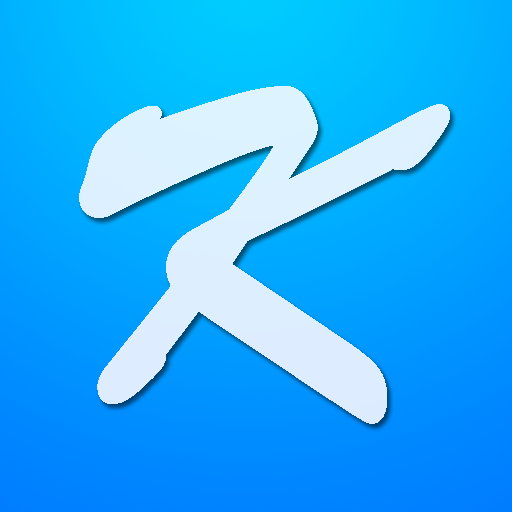
<style>
.page{position:relative;width:512px;height:512px}
.page>*{position:absolute;margin:0}
.t1{font:480px "STXingkai";letter-spacing:0.112em;color:#ddf1ff;font-weight:bold}
</style>
<div class="page">
<p class="t1" style="left:79px;top:86px;width:371px;height:338px">K</p>
</div>
